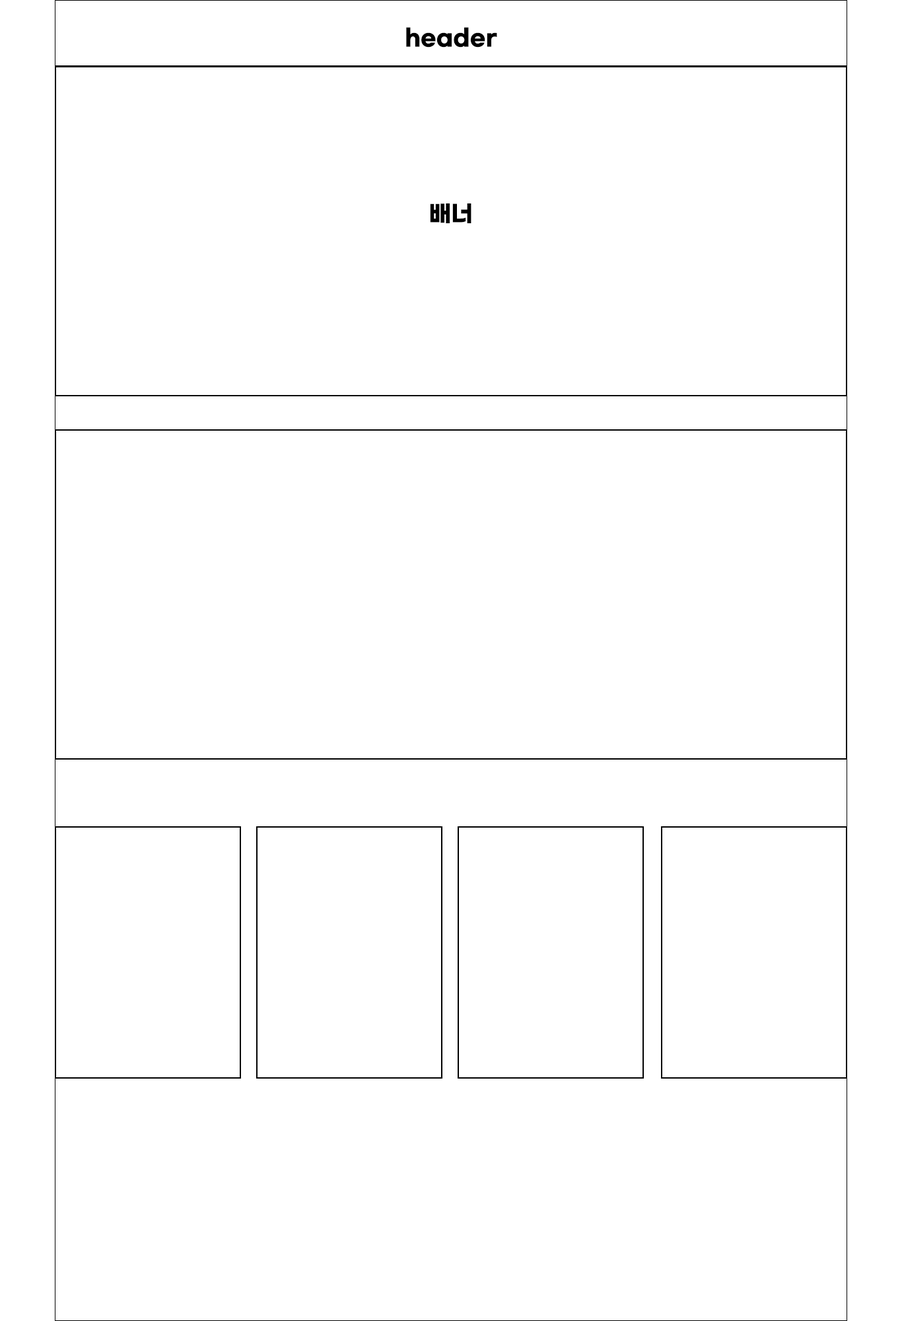
<style>
.page{position:relative;width:902px;height:1321px;background:#ffffff}
.page>*{position:absolute;margin:0}
.t1{font:22.9px "GmarketSansTTFBold";color:#000000}
</style>
<div class="page">
<p class="t1" style="left:406px;top:27px;width:91px;height:21px">header</p>
<p class="t1" style="left:430px;top:203px;width:42px;height:20px">배너</p>
</div>
